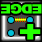
<style>
.page{position:relative;width:42px;height:42px}
.page>*{position:absolute;margin:0}
.t1{font:12.8px "Arial-Black";letter-spacing:-0.075em;color:#24ff00;scale:1.17 1}
.t2{font:28.8px "Arial-Black";letter-spacing:-0.075em;color:#24ff00;scale:1.3 1}
</style>
<div class="page">
<p class="t1" style="left:0px;top:4px;width:42px;height:10px;rotate:-180deg">EDGE</p>
<p class="t2" style="left:20px;top:24px;width:21px;height:16px;rotate:-180deg">+</p>
</div>
